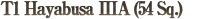
<style>
.page{position:relative;width:207px;height:19px;background:#ffffff}
.page>*{position:absolute;margin:0}
.t1{font:18px "RyuminPro-ExBold";letter-spacing:-0.08em;color:#4a3f32;font-weight:bold;scale:0.9 1}
</style>
<div class="page">
<p class="t1" style="left:0px;top:1px;width:183px;height:18px">T1 Hayabusa IIIA (54 Sq.)</p>
</div>
